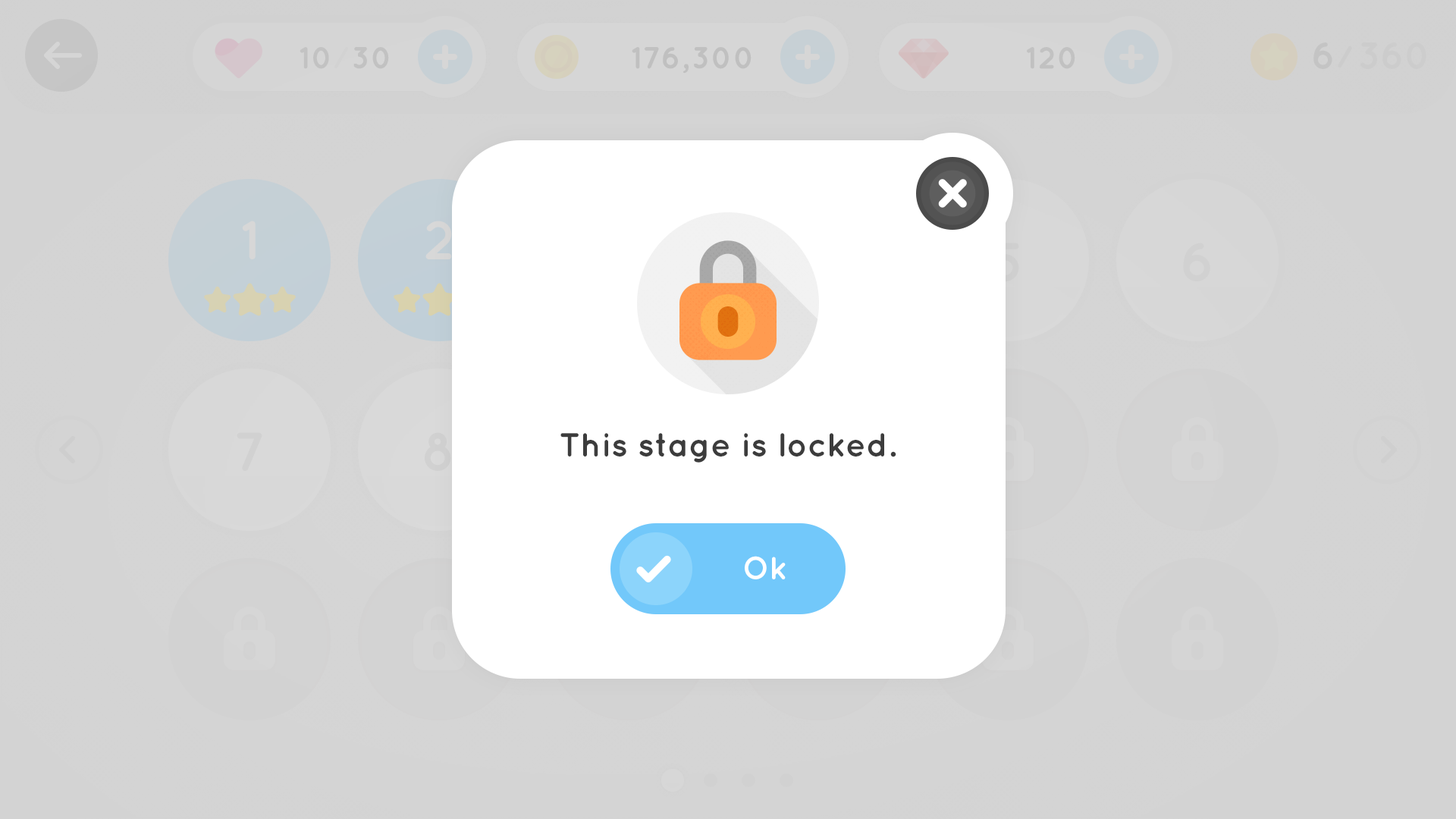
<style>
.page{position:relative;width:1456px;height:819px;background:#d4d4d4}
.page>*{position:absolute;margin:0}
.t1{font:33.4px "Quicksand-Bold";color:#3c3c3c}
.t2{font:31.8px "Quicksand-Bold";color:#ffffff}
</style>
<div class="page">
<p class="t1" style="left:560px;top:433px;width:336px;height:30px">This stage is locked.</p>
<p class="t2" style="left:745px;top:556px;width:41px;height:23px">Ok</p>
</div>
